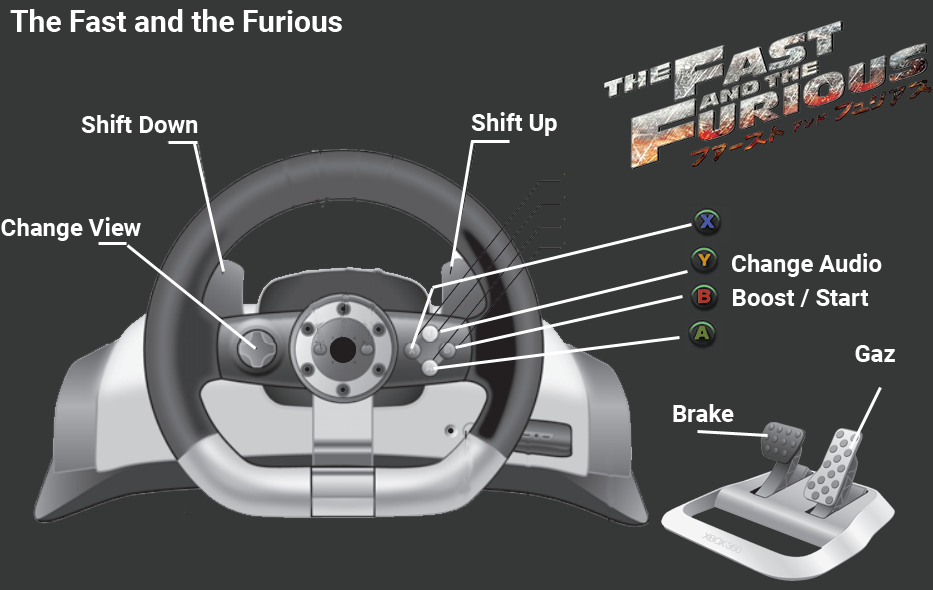
<style>
.page{position:relative;width:933px;height:590px;background:#363838}
.page>*{position:absolute;margin:0}
.t1{font:30px "Roboto-Bold";color:#ffffff}
.t2{font:24px "Roboto-Bold";color:#ffffff}
</style>
<div class="page">
<p class="t1" style="left:10px;top:9px;width:332px;height:23px">The Fast and the Furious</p>
<p class="t2" style="left:471px;top:112px;width:86px;height:24px">Shift Up</p>
<p class="t2" style="left:81px;top:114px;width:117px;height:19px">Shift Down</p>
<p class="t2" style="left:1px;top:217px;width:140px;height:24px">Change View</p>
<p class="t2" style="left:732px;top:253px;width:150px;height:24px">Change Audio</p>
<p class="t2" style="left:733px;top:289px;width:136px;height:18px">Boost / Start</p>
<p class="t2" style="left:855px;top:345px;width:40px;height:17px">Gaz</p>
<p class="t2" style="left:673px;top:404px;width:61px;height:18px">Brake</p>
</div>
